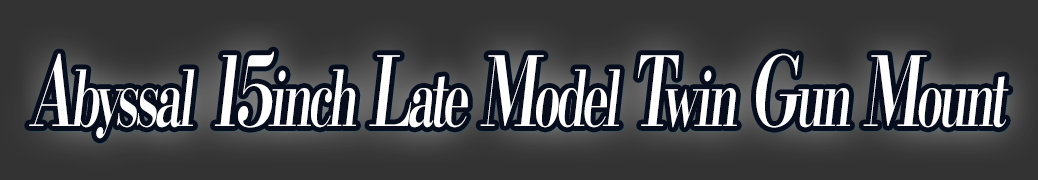
<style>
.page{position:relative;width:1038px;height:180px;background:#333333}
.page>*{position:absolute;margin:0}
.t1{font:76.8px "KochoStd-Heavy";letter-spacing:-0.08em;color:#ffffff;font-style:italic;scale:0.63 1}
.t2{font:96px "KochoStd-Heavy";letter-spacing:-0.08em;color:#ffffff;font-style:italic;scale:0.63 1}
</style>
<div class="page">
<p class="t1" style="left:29px;top:51px;width:980px;height:88px"><span class="t2">A</span>byssal<span class="t2"> 15</span>inch<span class="t2"> L</span>ate<span class="t2"> M</span>odel<span class="t2"> T</span>win<span class="t2"> G</span>un<span class="t2"> M</span>ount</p>
</div>
